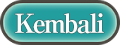
<style>
.page{position:relative;width:120px;height:45px}
.page>*{position:absolute;margin:0}
.t1{font:26px "RyuminPro-ExBold";letter-spacing:-0.08em;color:#fdfbf9}
</style>
<div class="page">
<p class="t1" style="left:15px;top:13px;width:89px;height:21px">Kembali</p>
</div>
